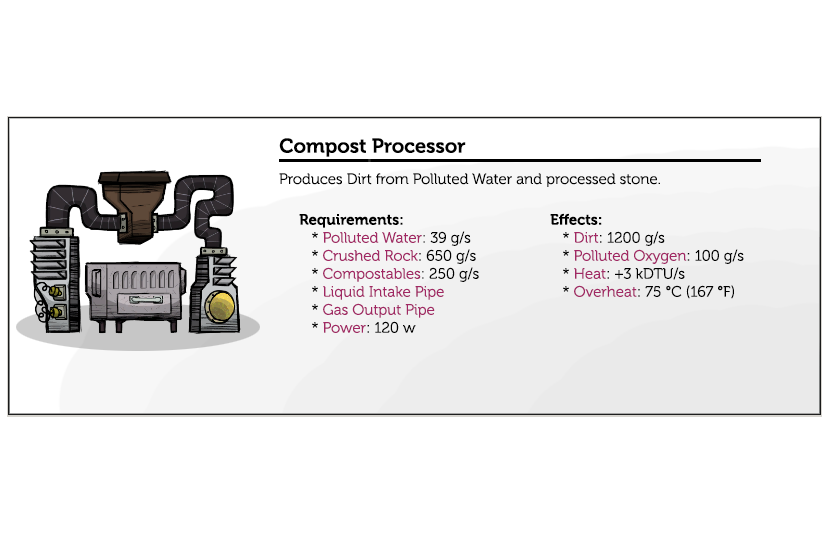
<style>
.page{position:relative;width:830px;height:550px;background:#ffffff}
.page>*{position:absolute;margin:0}
.t1{font:20px "Museo-700";color:#000000}
.t2{font:15px "Museo-300";color:#000000}
.t3{font:15px "Museo-700";color:#000000}
.t4{font:15px "Museo-300";color:#a12864}
</style>
<div class="page">
<p class="t1" style="left:279px;top:138px;width:187px;height:19px">Compost Processor</p>
<p class="t2" style="left:279px;top:173px;width:381px;height:14px">Produces Dirt from Polluted Water and processed stone.</p>
<p class="t2" style="left:299px;top:214px;width:180px;height:119px"><span class="t3">Requirements:</span><br>   * <span class="t4">Polluted Water</span>: 39 g/s                    <br>   * <span class="t4">Crushed Rock</span>: 650 g/s<br>   * <span class="t4">Compostables</span>: 250 g/s<br>   * <span class="t4">Liquid Intake Pipe<br></span>   * <span class="t4">Gas Output Pipe<br></span>   * <span class="t4">Power</span>: 120 w</p>
<p class="t2" style="left:550px;top:213px;width:194px;height:86px"><span class="t3">Effects:</span><br>   * <span class="t4">Dirt</span>: 1200 g/s                    <br>   * <span class="t4">Polluted Oxygen</span>: 100 g/s<br>   * <span class="t4">Heat</span>: +3 kDTU/s<br>   * <span class="t4">Overheat</span>: 75 °C (167 °F)</p>
</div>
